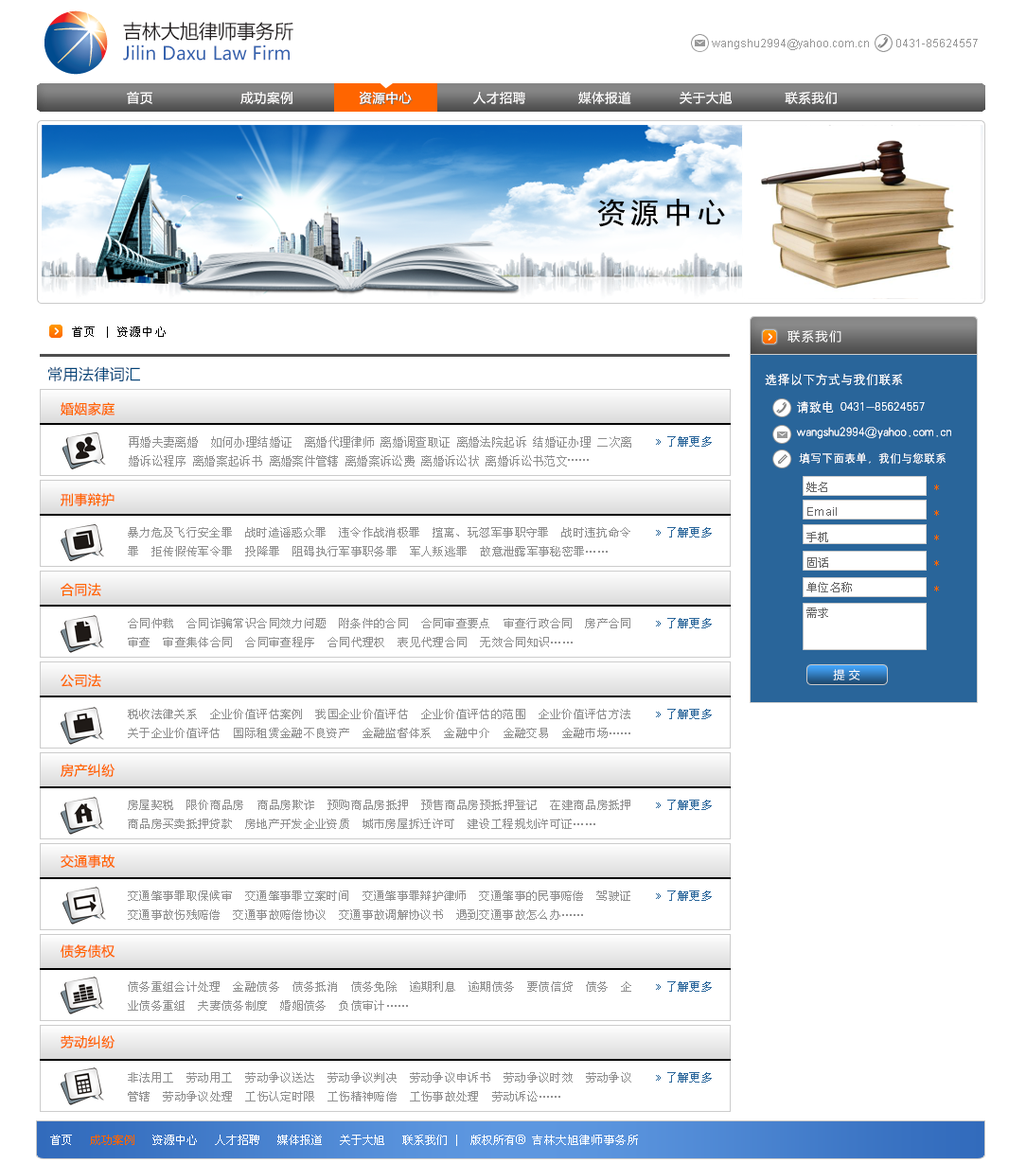
<style>
.page{position:relative;width:1026px;height:1163px;background:#ffffff}
.page>*{position:absolute;margin:0}
.t1{font:18.4px "MicrosoftYaHei";color:#3562ae}
.t2{font:18.9px "MicrosoftYaHei";color:#231f20}
.t3{font:11.4px "ArialMT";color:#989898}
.t4{font:12.6px "MicrosoftYaHei";letter-spacing:0.05em;color:#fffefe}
.t5{font:30.3px "SimHei";letter-spacing:0.1em;color:#000000}
.t6{font:11.4px "SimSun";letter-spacing:0.1em;color:#000000}
.t7{font:12.6px "MicrosoftYaHei";letter-spacing:0.1em;color:#ffffff}
.t8{font:15.1px "MicrosoftYaHei";letter-spacing:0.029em;color:#004378}
.t9{font:12.6px/27.8px "HYg2gj";color:#ffffff}
.t10{font:12.6px/25.2px "HYg2gj";color:#ffffff}
.t11{font:11.4px/25.2px "HYg2gj";color:#ffffff}
.t12{font:13.2px "MicrosoftYaHei";letter-spacing:0.029em;color:#ff6600}
.t13{font:11.4px/18.9px "SimSun";letter-spacing:0.029em;color:#909090}
.t14{font:11.4px "SimSun";letter-spacing:0.029em;color:#29659a}
.t15{font:12.6px "ArialMT";letter-spacing:0.029em;color:#29659a}
.t16{font:11.4px/25.2px "SimSun";letter-spacing:0.029em;color:#666666}
.t17{font:11.4px/25.2px "ArialMT";letter-spacing:0.029em;color:#666666}
.t18{font:11.4px/25.2px "SimSun";letter-spacing:0.029em;color:#ff6500}
.t19{font:11.4px "MicrosoftYaHei";letter-spacing:0.029em;color:#ffffff}
.t20{font:11.4px "SimSun";color:#ffffff}
.t21{font:11.4px "SimSun";color:#ff6500}
.t22{font:12.6px "ArialMT";color:#ffffff}
.t23{font:11.4px "SimSun";letter-spacing:0.05em;color:#ffffff}
</style>
<div class="page">
<p class="t1" style="left:123px;top:22px;width:170px;height:39px"><span class="t2">吉林大旭律师事务所<br></span>Jilin Daxu Law Firm</p>
<p class="t3" style="left:711px;top:39px;width:266px;height:11px">wangshu2994@yahoo.com.cn         0431-85624557</p>
<p class="t4" style="left:127px;top:91px;width:709px;height:13px">首页                    成功案例               资源中心              人才招聘            媒体报道           关于大旭            联系我们</p>
<p class="t4" style="left:127px;top:91px;width:709px;height:13px">首页                    成功案例               资源中心              人才招聘            媒体报道           关于大旭            联系我们</p>
<p class="t5" style="left:597px;top:199px;width:128px;height:28px">资源中心</p>
<p class="t6" style="left:72px;top:326px;width:94px;height:12px">首页 | 资源中心</p>
<p class="t7" style="left:787px;top:330px;width:54px;height:12px">联系我们</p>
<p class="t7" style="left:787px;top:330px;width:54px;height:12px">联系我们</p>
<p class="t8" style="left:48px;top:366px;width:92px;height:16px">常用法律词汇</p>
<p class="t9" style="left:764px;top:374px;width:187px;height:90px">选择以下方式与我们联系<br>     请致电 0431-85624557<br><span class="t10">     wangshu2994@yahoo.com.cn<br></span><span class="t11">      填写下面表单，我们与您联系</span></p>
<p class="t9" style="left:764px;top:374px;width:187px;height:90px">选择以下方式与我们联系<br>     请致电 0431-85624557<br><span class="t10">     wangshu2994@yahoo.com.cn<br></span><span class="t11">      填写下面表单，我们与您联系</span></p>
<p class="t12" style="left:61px;top:402px;width:54px;height:13px">婚姻家庭</p>
<p class="t13" style="left:129px;top:436px;width:502px;height:30px">再婚夫妻离婚  如何办理结婚证  离婚代理律师 离婚调查取证 离婚法院起诉 结婚证办理 二次离婚诉讼程序 离婚案起诉书 离婚案件管辖 离婚案诉讼费 离婚诉讼状 离婚诉讼书范文……</p>
<p class="t14" style="left:656px;top:436px;width:55px;height:11px"><span class="t15">» </span>了解更多</p>
<p class="t16" style="left:806px;top:482px;width:45px;height:136px">姓名<br><span class="t17">Email<br></span>手机<br>固话<br>单位名称<br>需求</p>
<p class="t18" style="left:934px;top:484px;width:5px;height:107px">*<br>*<br>*<br>*<br>*</p>
<p class="t12" style="left:61px;top:493px;width:53px;height:13px">刑事辩护</p>
<p class="t13" style="left:128px;top:527px;width:502px;height:29px">暴力危及飞行安全罪  战时造谣惑众罪  违令作战消极罪  擅离、玩忽军事职守罪  战时违抗命令罪  拒传假传军令罪  投降罪  阻碍执行军事职务罪  军人叛逃罪  故意泄露军事秘密罪……</p>
<p class="t14" style="left:656px;top:527px;width:55px;height:10px"><span class="t15">» </span>了解更多</p>
<p class="t12" style="left:61px;top:583px;width:40px;height:13px">合同法</p>
<p class="t13" style="left:128px;top:618px;width:502px;height:29px">合同仲裁  合同诈骗常识合同效力问题  附条件的合同  合同审查要点  审查行政合同  房产合同审查  审查集体合同  合同审查程序  合同代理权  表见代理合同  无效合同知识……</p>
<p class="t14" style="left:656px;top:618px;width:55px;height:10px"><span class="t15">» </span>了解更多</p>
<p class="t12" style="left:61px;top:674px;width:40px;height:13px">公司法</p>
<p class="t19" style="left:833px;top:669px;width:27px;height:11px">提 交</p>
<p class="t13" style="left:128px;top:709px;width:502px;height:29px">税收法律关系  企业价值评估案例  我国企业价值评估  企业价值评估的范围  企业价值评估方法  关于企业价值评估  国际租赁金融不良资产  金融监督体系  金融中介  金融交易  金融市场……</p>
<p class="t14" style="left:656px;top:709px;width:55px;height:10px"><span class="t15">» </span>了解更多</p>
<p class="t12" style="left:61px;top:763px;width:54px;height:14px">房产纠纷</p>
<p class="t13" style="left:128px;top:799px;width:502px;height:30px">房屋契税  限价商品房  商品房欺诈  预购商品房抵押  预售商品房预抵押登记  在建商品房抵押  商品房买卖抵押贷款  房地产开发企业资质  城市房屋拆迁许可  建设工程规划许可证……</p>
<p class="t14" style="left:656px;top:799px;width:55px;height:11px"><span class="t15">» </span>了解更多</p>
<p class="t12" style="left:61px;top:854px;width:54px;height:14px">交通事故</p>
<p class="t13" style="left:128px;top:890px;width:502px;height:30px">交通肇事罪取保候审  交通肇事罪立案时间  交通肇事罪辩护律师  交通肇事的民事赔偿  驾驶证  交通事故伤残赔偿  交通事故赔偿协议  交通事故调解协议书  遇到交通事故怎么办……</p>
<p class="t14" style="left:656px;top:890px;width:55px;height:11px"><span class="t15">» </span>了解更多</p>
<p class="t12" style="left:61px;top:944px;width:54px;height:13px">债务债权</p>
<p class="t13" style="left:128px;top:981px;width:503px;height:29px">债务重组会计处理  金融债务  债务抵消  债务免除  逾期利息  逾期债务  要债信贷  债务  企业债务重组  夫妻债务制度  婚姻债务  负债审计……</p>
<p class="t14" style="left:656px;top:981px;width:55px;height:10px"><span class="t15">» </span>了解更多</p>
<p class="t12" style="left:61px;top:1035px;width:54px;height:13px">劳动纠纷</p>
<p class="t13" style="left:128px;top:1072px;width:503px;height:29px">非法用工  劳动用工  劳动争议送达  劳动争议判决  劳动争议申诉书  劳动争议时效  劳动争议管辖  劳动争议处理  工伤认定时限  工伤精神赔偿  工伤事故处理  劳动诉讼……</p>
<p class="t14" style="left:656px;top:1072px;width:55px;height:10px"><span class="t15">» </span>了解更多</p>
<p class="t20" style="left:50px;top:1134px;width:588px;height:12px">首页   <span class="t21">成功案例 </span>  资源中心   人才招聘   媒体报道   关于大旭   联系我们 |  版权所有<span class="t22">® </span><span class="t23">吉林大旭律师事务所</span></p>
</div>
